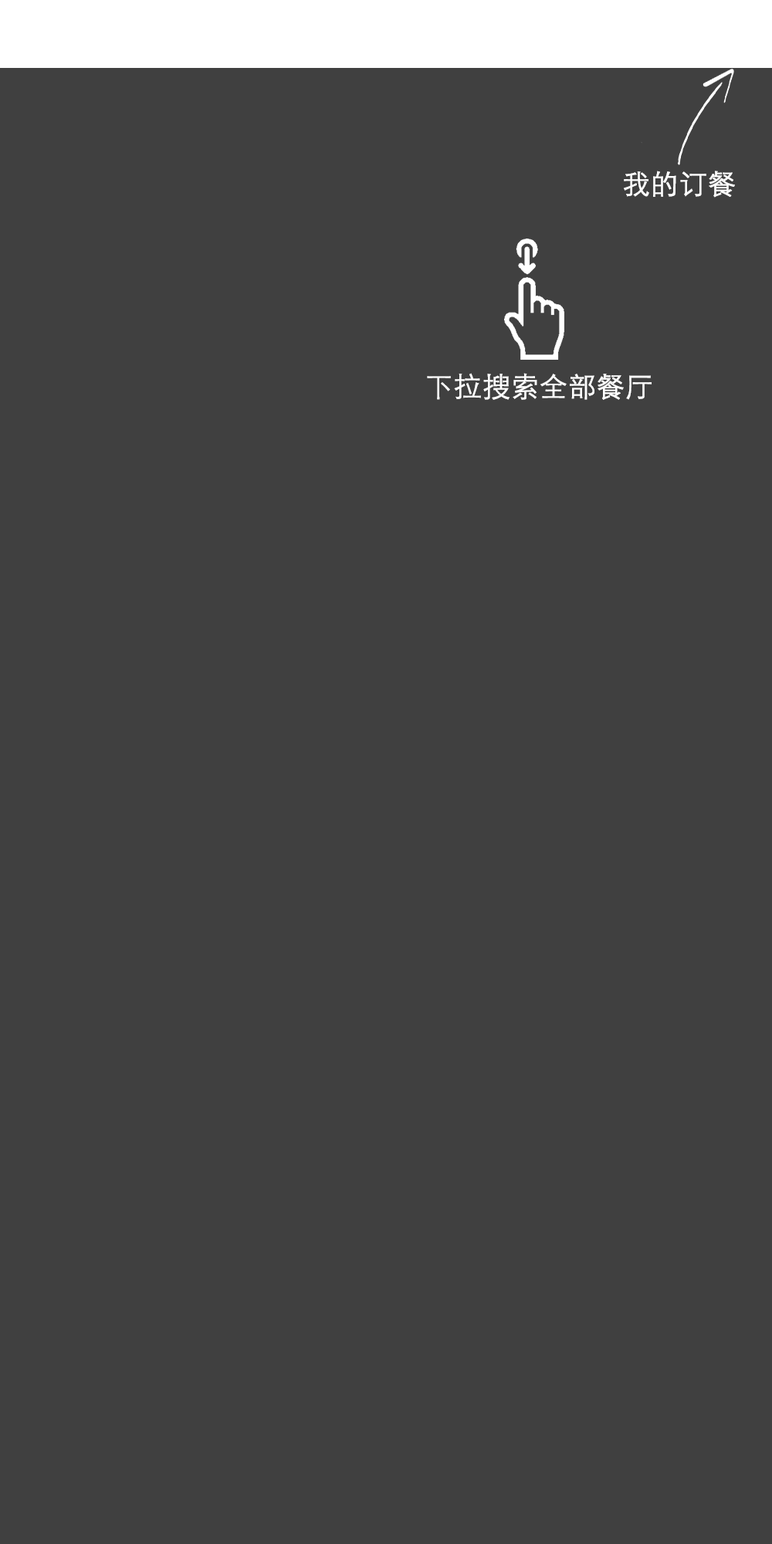
<style>
.page{position:relative;width:772px;height:1544px;background:#404040}
.page>*{position:absolute;margin:0}
.t1{font:27.8px "STXihei";color:#ffffff;font-weight:bold}
</style>
<div class="page">
<p class="t1" style="left:624px;top:171px;width:111px;height:27px">我的订餐</p>
<p class="t1" style="left:427px;top:373px;width:225px;height:27px">下拉搜索全部餐厅</p>
</div>
